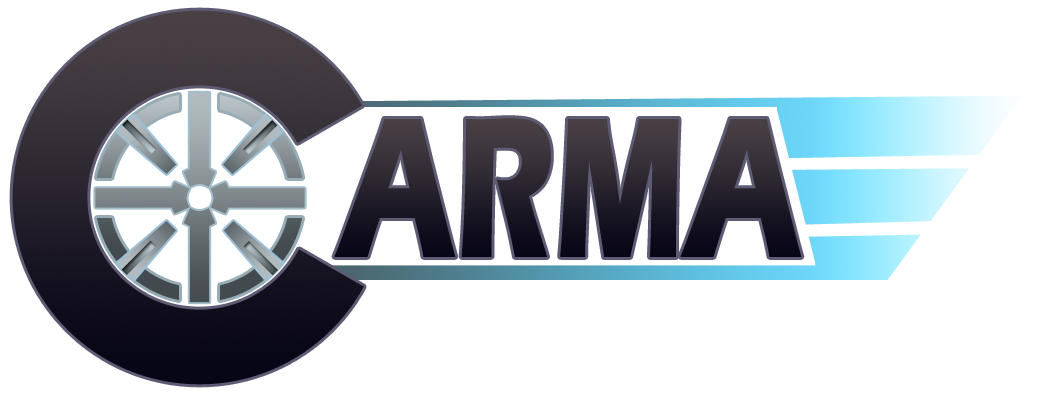
<style>
.page{position:relative;width:1062px;height:406px;background:#ffffff}
.page>*{position:absolute;margin:0}
.t1{font:206.9px "ErasITC-Bold";scale:0.69 1}
</style>
<div class="page">
<p class="t1" style="left:334px;top:118px;width:468px;height:139px">ARMA</p>
</div>
